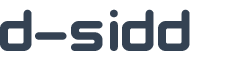
<style>
.page{position:relative;width:250px;height:60px;background:#ffffff}
.page>*{position:absolute;margin:0}
.t1{font:60px "The-Hummel-Font";color:#344253;scale:1.05 1}
</style>
<div class="page">
<p class="t1" style="left:0px;top:9px;width:190px;height:42px">d-sidd</p>
</div>
